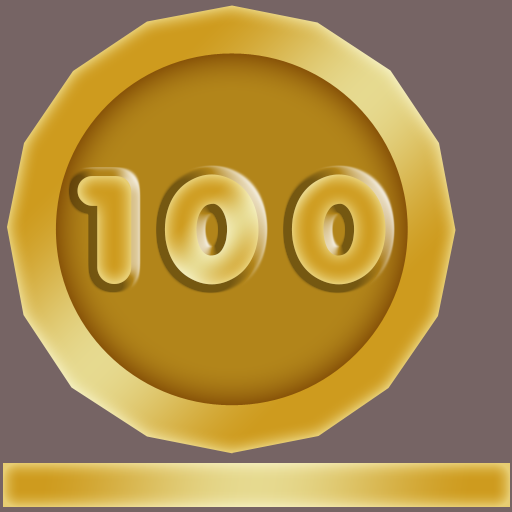
<style>
.page{position:relative;width:512px;height:512px;background:#766464}
.page>*{position:absolute;margin:0}
.t1{font:147px "Anja-Eliane-Nornal";letter-spacing:0.185em}
.t2{font:147px "Anja-Eliane-Nornal"}
</style>
<div class="page">
<p class="t1" style="left:77px;top:174px;width:309px;height:111px"><span class="t2">1</span>00</p>
</div>
